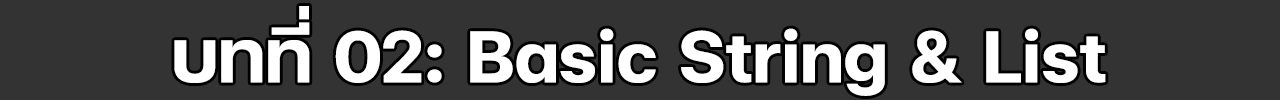
<style>
.page{position:relative;width:1280px;height:100px;background:#333333}
.page>*{position:absolute;margin:0}
.t1{font:100px "FCMinimalBold";color:#ffffff}
</style>
<div class="page">
<p class="t1" style="left:174px;top:6px;width:932px;height:90px">บทที่ 02: Basic String &amp; List</p>
</div>
